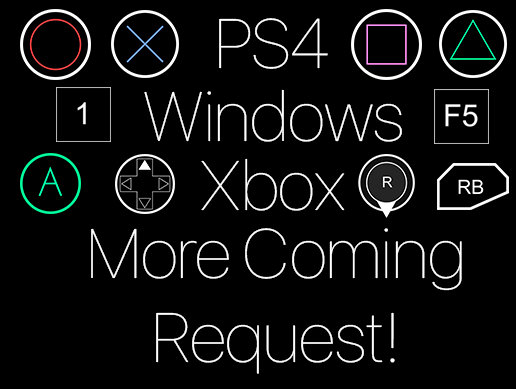
<style>
.page{position:relative;width:516px;height:389px;background:#000000}
.page>*{position:absolute;margin:0}
.t1{font:69.4px "SFUIDisplay-Ultralight";color:#ffffff}
</style>
<div class="page">
<p class="t1" style="left:219px;top:18px;width:109px;height:51px">PS4</p>
<p class="t1" style="left:144px;top:89px;width:258px;height:53px">Windows</p>
<p class="t1" style="left:201px;top:158px;width:144px;height:53px">Xbox</p>
<p class="t1" style="left:91px;top:228px;width:371px;height:146px;text-align:center">More Coming<br>Request!</p>
</div>
